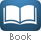
<style>
.page{position:relative;width:41px;height:52px;background:#ffffff}
.page>*{position:absolute;margin:0}
.t1{font:9px "MyriadPro-Regular";letter-spacing:0.05em;color:#878787}
</style>
<div class="page">
<p class="t1" style="left:10px;top:33px;width:21px;height:7px">Book</p>
</div>
